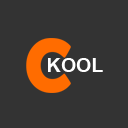
<style>
.page{position:relative;width:128px;height:128px;background:#333333}
.page>*{position:absolute;margin:0}
.t1{font:30px "BrowalliaUPC-Bold";color:#ffffff}
</style>
<div class="page">
<p class="t1" style="left:48px;top:58px;width:55px;height:14px">KOOL</p>
</div>
